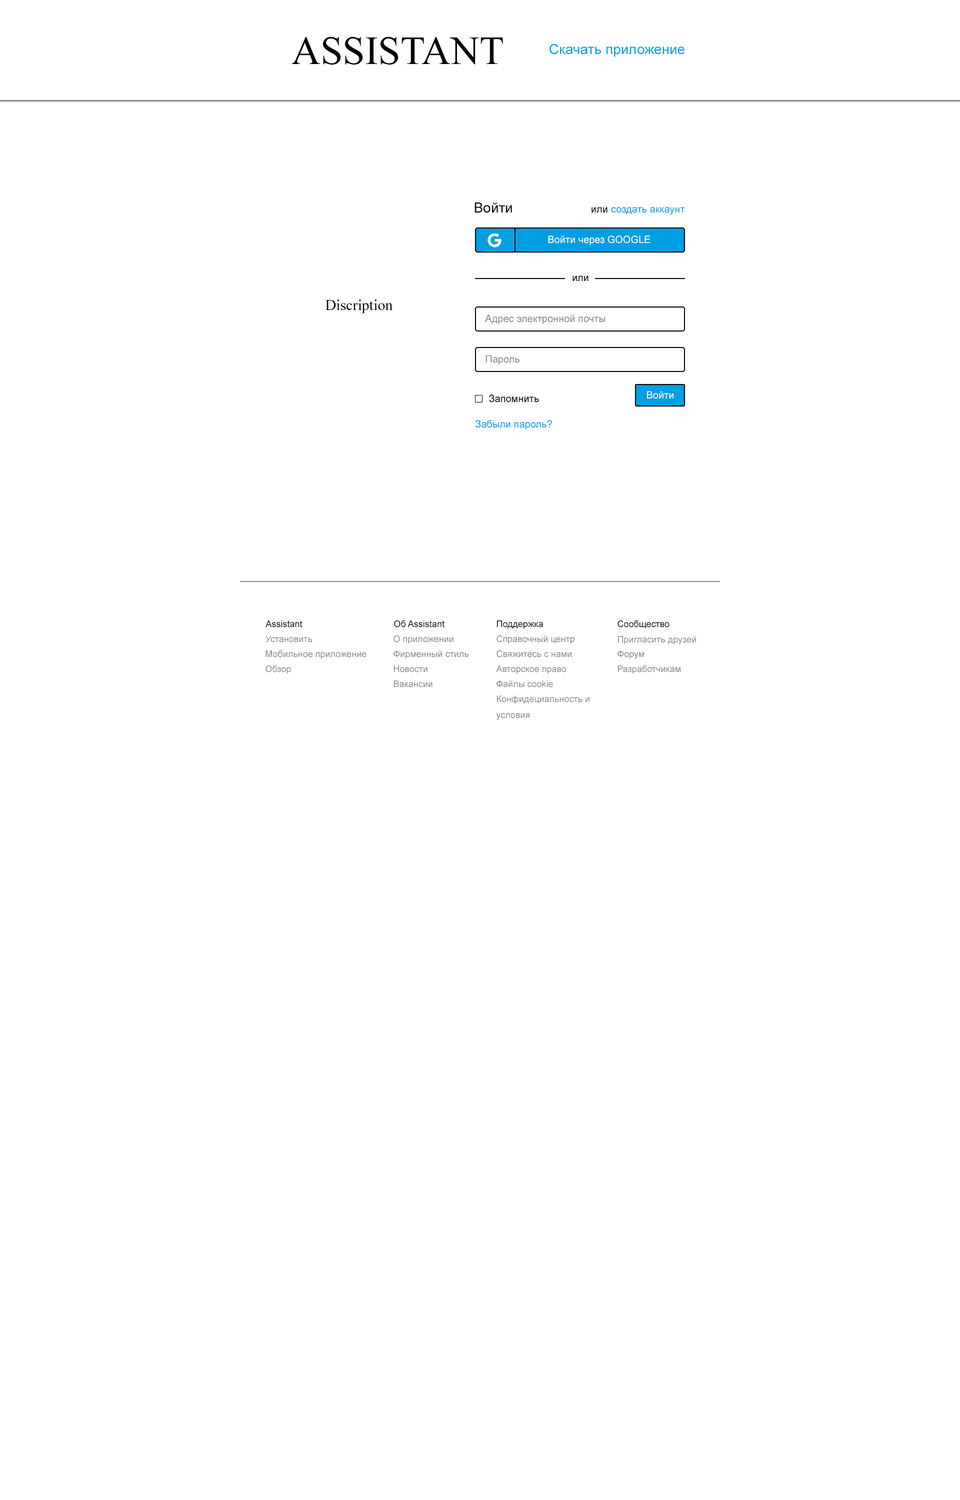
<style>
.page{position:relative;width:960px;height:1500px;background:#ffffff}
.page>*{position:absolute;margin:0}
.t1{font:40px "TimesNewRomanPSMT";color:#000000;text-transform:uppercase}
.t2{font:14px "ArialMT";color:#009fe3}
.t3{font:14px "ArialMT";color:#000000}
.t4{font:10px "ArialMT";color:#000000}
.t5{font:10px "ArialMT";color:#009fe3}
.t6{font:10px "ArialMT";color:#ffffff}
.t7{font:15px "TimesNewRomanPSMT";color:#000000}
.t8{font:10px "ArialMT";color:#878787}
.t9{font:10px "ArialMT";color:#888888}
.t10{font:9px "ArialMT";color:#000000}
.t11{font:9px "ArialMT";color:#888888}
.t12{font:9px/16px "ArialMT";color:#888888}
</style>
<div class="page">
<p class="t1" style="left:292px;top:36px;width:211px;height:29px">Assistant</p>
<p class="t2" style="left:550px;top:44px;width:134px;height:13px">Скачать приложение</p>
<p class="t3" style="left:474px;top:202px;width:38px;height:11px">Войти</p>
<p class="t4" style="left:592px;top:207px;width:16px;height:5px">или</p>
<p class="t5" style="left:611px;top:207px;width:74px;height:8px">создать аккаунт</p>
<p class="t6" style="left:548px;top:236px;width:102px;height:9px">Войти через GOOGLE</p>
<p class="t4" style="left:572px;top:276px;width:16px;height:5px">или</p>
<p class="t7" style="left:326px;top:300px;width:67px;height:14px">Discription</p>
<p class="t8" style="left:485px;top:314px;width:121px;height:10px">Адрес электронной почты</p>
<p class="t9" style="left:486px;top:355px;width:34px;height:9px">Пароль</p>
<p class="t4" style="left:489px;top:394px;width:50px;height:8px">Запомнить</p>
<p class="t6" style="left:647px;top:391px;width:27px;height:8px">Войти</p>
<p class="t5" style="left:476px;top:420px;width:76px;height:10px">Забыли пароль?</p>
<p class="t10" style="left:266px;top:620px;width:36px;height:8px">Assistant</p>
<p class="t10" style="left:394px;top:620px;width:50px;height:8px">Об Assistant</p>
<p class="t10" style="left:497px;top:620px;width:46px;height:9px">Поддержка</p>
<p class="t10" style="left:618px;top:620px;width:52px;height:8px">Сообщество</p>
<p class="t11" style="left:266px;top:636px;width:46px;height:6px">Установить</p>
<p class="t11" style="left:394px;top:635px;width:60px;height:9px">О приложении</p>
<p class="t11" style="left:496px;top:635px;width:78px;height:9px">Справочный центр</p>
<p class="t11" style="left:618px;top:636px;width:78px;height:8px">Пригласить друзей</p>
<p class="t11" style="left:266px;top:650px;width:100px;height:9px">Мобильное приложение</p>
<p class="t11" style="left:394px;top:650px;width:74px;height:9px">Фирменный стиль</p>
<p class="t11" style="left:496px;top:650px;width:76px;height:8px">Свяжитесь с нами</p>
<p class="t11" style="left:618px;top:650px;width:26px;height:9px">Форум</p>
<p class="t11" style="left:266px;top:665px;width:25px;height:9px">Обзор</p>
<p class="t11" style="left:394px;top:666px;width:34px;height:6px">Новости</p>
<p class="t11" style="left:496px;top:666px;width:70px;height:8px">Авторское право</p>
<p class="t11" style="left:618px;top:665px;width:62px;height:9px">Разработчикам</p>
<p class="t11" style="left:394px;top:680px;width:38px;height:8px">Вакансии</p>
<p class="t11" style="left:496px;top:680px;width:57px;height:8px">Файлы cookie</p>
<p class="t12" style="left:496px;top:696px;width:94px;height:24px">Конфидециальность и<br>условия</p>
</div>
